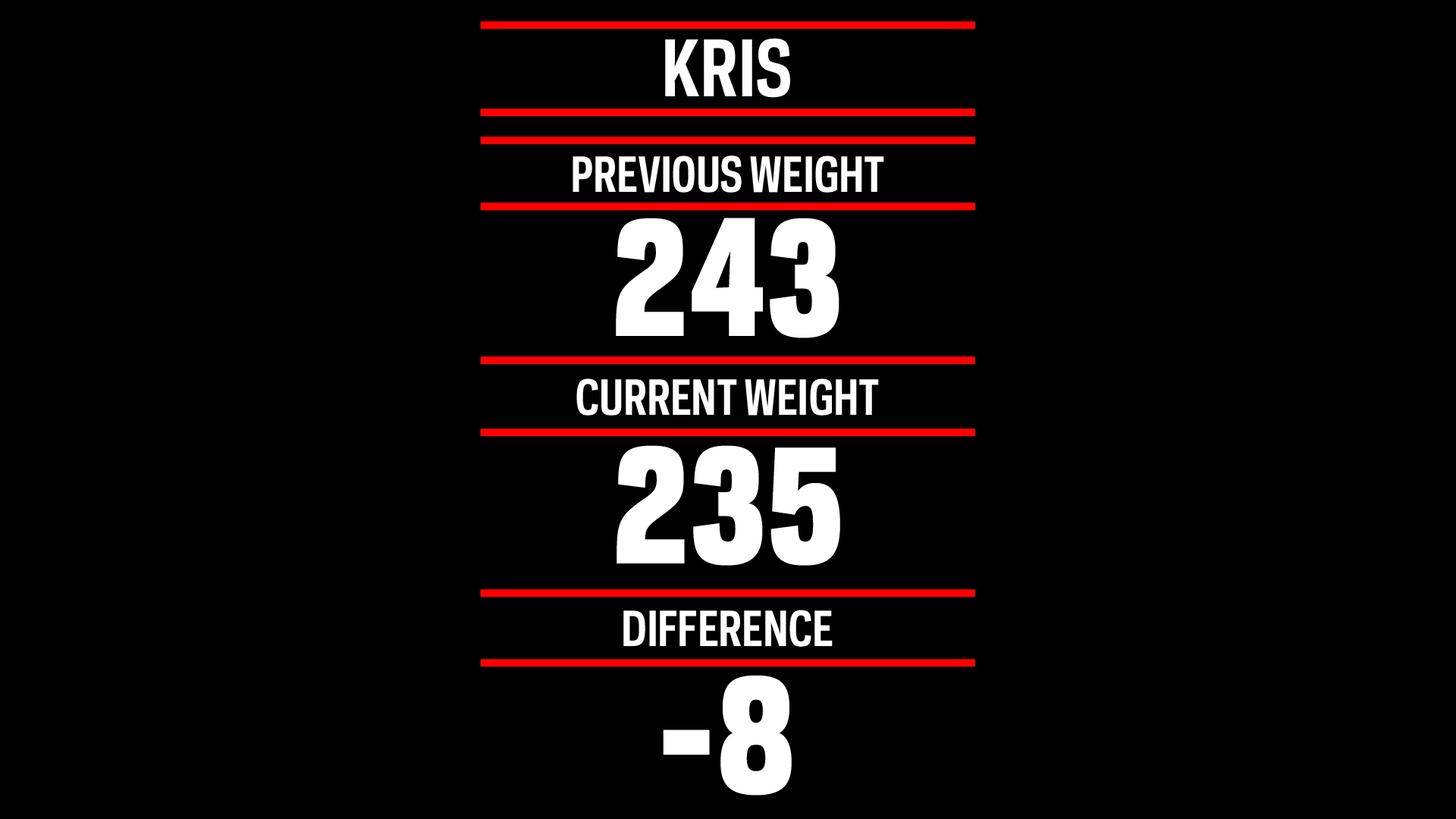
<style>
.page{position:relative;width:1456px;height:819px;background:#000000}
.page>*{position:absolute;margin:0}
.t1{font:72.8px "GalaxiePolarisCondensed-Bold";letter-spacing:-0.01em;color:#ffffff}
.t2{font:45.5px "GalaxiePolarisCondensed-Bold";letter-spacing:-0.01em;color:#ffffff}
.t3{font:151.7px "GalaxiePolarisCondensed-Heavy";letter-spacing:-0.01em;color:#ffffff}
</style>
<div class="page">
<p class="t1" style="left:665px;top:38px;width:125px;height:60px">KRIS</p>
<p class="t2" style="left:573px;top:155px;width:311px;height:38px">PREVIOUS WEIGHT</p>
<p class="t3" style="left:616px;top:218px;width:223px;height:120px">243</p>
<p class="t2" style="left:576px;top:378px;width:303px;height:38px">CURRENT WEIGHT</p>
<p class="t3" style="left:617px;top:445px;width:223px;height:121px">235</p>
<p class="t2" style="left:623px;top:610px;width:210px;height:37px">DIFFERENCE</p>
<p class="t3" style="left:663px;top:675px;width:129px;height:120px">-8</p>
</div>
